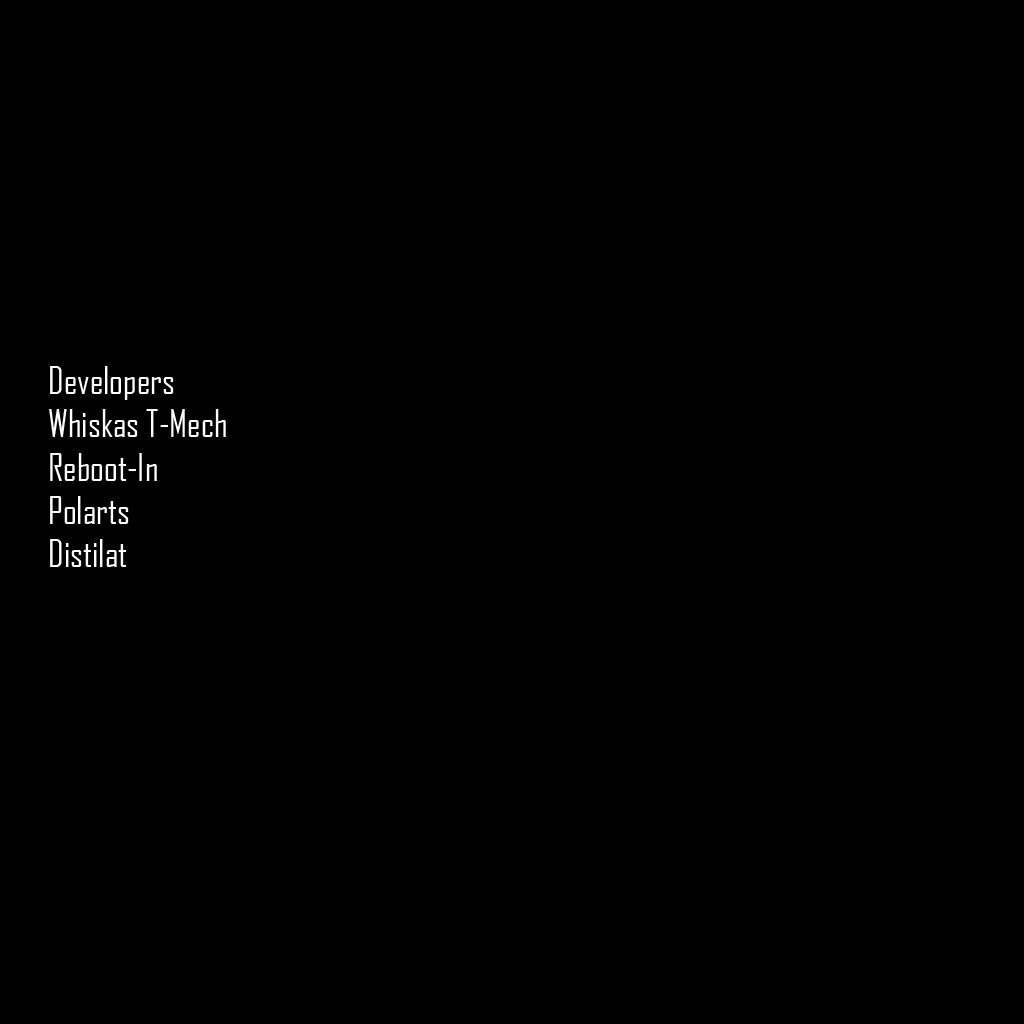
<style>
.page{position:relative;width:1024px;height:1024px;background:#000000}
.page>*{position:absolute;margin:0}
.t1{font:36px "AgencyFBCyrillic";color:#ffffff}
</style>
<div class="page">
<p class="t1" style="left:49px;top:366px;width:177px;height:201px">Developers<br>Whiskas T-Mech<br>Reboot-In<br>Polarts<br>Distilat</p>
</div>
